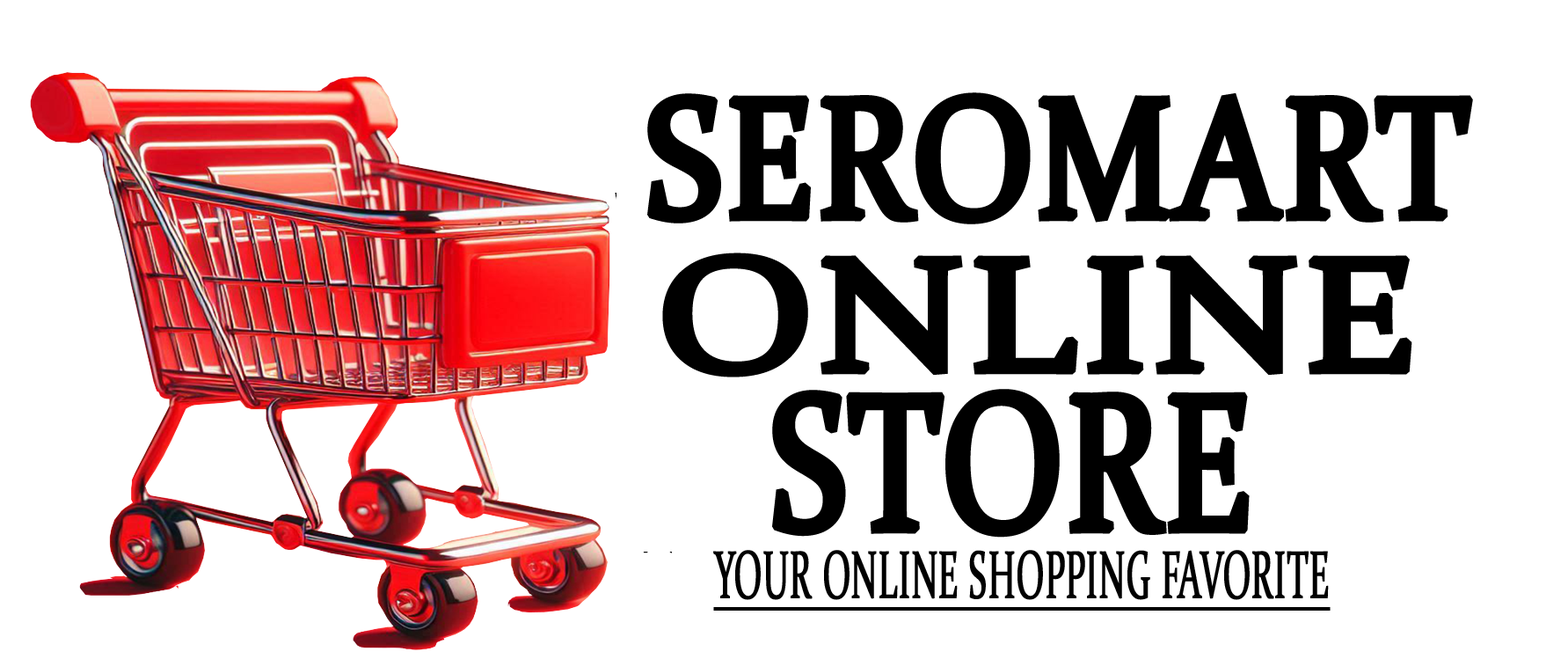
<style>
.page{position:relative;width:1568px;height:659px;background:#ffffff}
.page>*{position:absolute;margin:0}
.t1{font:170.2px "Constantia";letter-spacing:0.005em;color:#000000;text-transform:uppercase;font-weight:bold;scale:0.88 1}
.t2{font:159.8px "Constantia";letter-spacing:0.005em;color:#000000;text-transform:uppercase;font-weight:bold;scale:1.2 1}
.t3{font:193px "Constantia";letter-spacing:0.005em;color:#000000;text-transform:uppercase;font-weight:bold;scale:0.77 1}
.t4{font:67.5px "Constantia";letter-spacing:0.005em;color:#000000;text-transform:uppercase;font-weight:bold;text-decoration:underline;scale:0.51 1}
</style>
<div class="page">
<p class="t1" style="left:647px;top:92px;width:826px;height:132px">SEROMART</p>
<p class="t2" style="left:662px;top:252px;width:750px;height:125px">online</p>
<p class="t3" style="left:772px;top:389px;width:478px;height:148px">store</p>
<p class="t4" style="left:713px;top:550px;width:618px;height:60px">your online shopping favorite</p>
</div>
